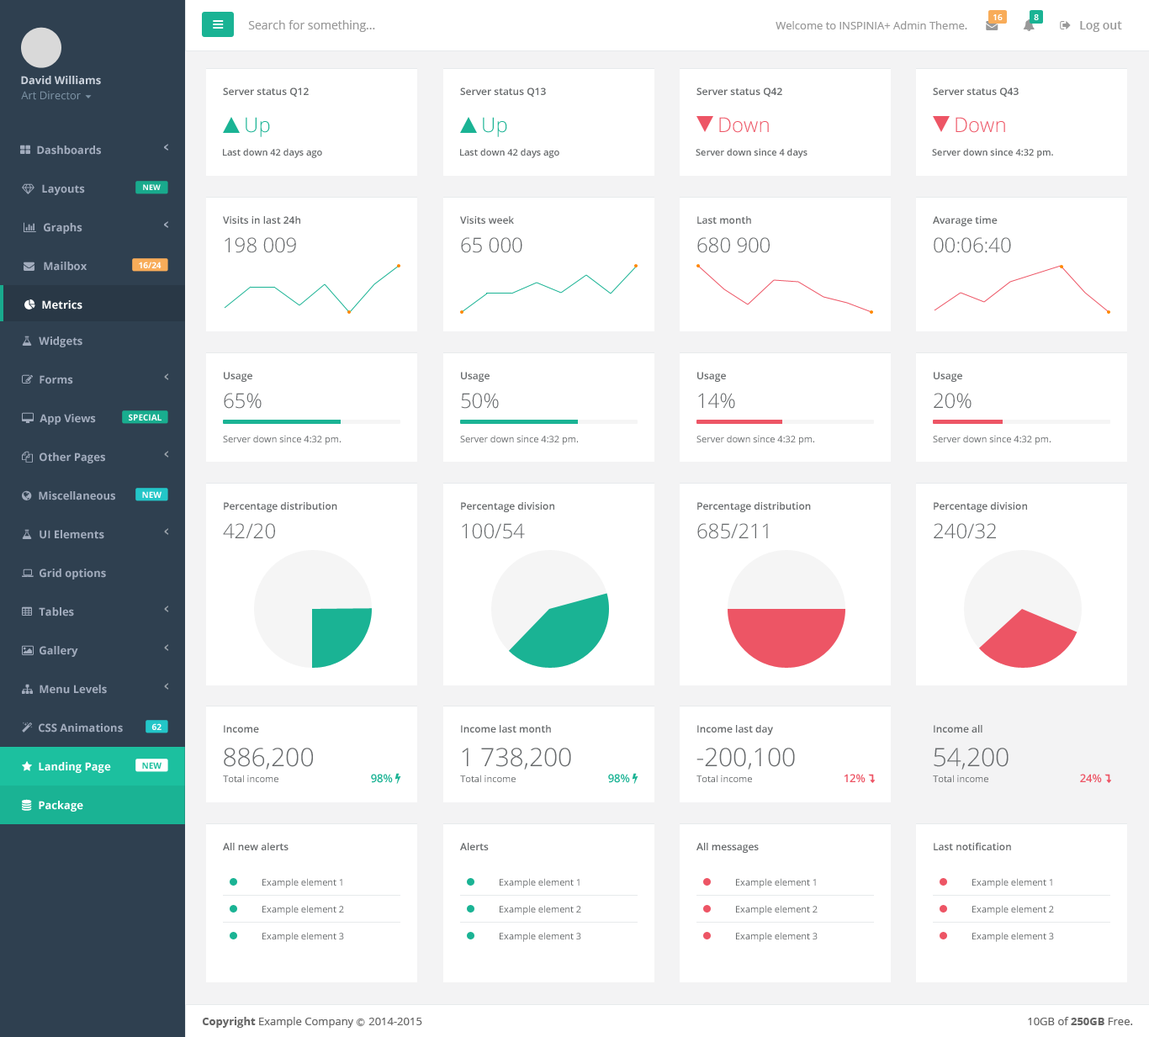
<style>
.page{position:relative;width:1149px;height:1037px;background:#ffffff}
.page>*{position:absolute;margin:0}
.t1{font:8.4px "OpenSans-Semibold";color:#ffffff}
.t2{font:11.8px "OpenSans";color:#999999}
.t3{font:10.9px "OpenSans";color:#999999}
.t4{font:11.8px "OpenSans-Semibold";color:#999999}
.t5{font:10.9px "OpenSans-Bold";color:#cad1db}
.t6{font:10.1px "OpenSans-Semibold";color:#676a6c}
.t7{font:10.9px "OpenSans";color:#7d93a5}
.t8{font:20.2px "OpenSans-Light";color:#1ab394}
.t9{font:20.2px "OpenSans-Light";color:#ed5565}
.t10{font:10.9px "OpenSans-Bold";color:#a2acbd}
.t11{font:9.3px "OpenSans-Semibold";color:#676a6c}
.t12{font:7.6px "OpenSans-Bold";color:#fefefe}
.t13{font:20.2px "OpenSans-Light";color:#676a6c}
.t14{font:8.4px "OpenSans-Bold";color:#fefefe}
.t15{font:10.9px "OpenSans-Bold";color:#ffffff}
.t16{font:9.3px "OpenSans";color:#676a6c}
.t17{font:25.2px "OpenSans-Light";color:#676a6c}
.t18{font:8.4px "OpenSans-Bold";color:#1cc09f}
.t19{font:10.9px "OpenSans-Semibold";color:#1ab394}
.t20{font:10.9px "OpenSans-Semibold";color:#ed5565}
.t21{font:10.9px "OpenSans";color:#666666}
.t22{font:10.9px "OpenSans-Bold";color:#666666}
.t23{font:8.4px "Meiryo";color:#666666}
</style>
<div class="page">
<p class="t1" style="left:994px;top:14px;width:9px;height:6px">16</p>
<p class="t1" style="left:1034px;top:14px;width:5px;height:6px">8</p>
<p class="t2" style="left:248px;top:20px;width:127px;height:12px">Search for something...</p>
<p class="t3" style="left:776px;top:21px;width:192px;height:8px">Welcome to INSPINIA+ Admin Theme.</p>
<p class="t4" style="left:1080px;top:21px;width:42px;height:11px">Log out</p>
<p class="t5" style="left:21px;top:76px;width:80px;height:9px">David Williams</p>
<p class="t6" style="left:223px;top:88px;width:86px;height:9px">Server status Q12</p>
<p class="t6" style="left:460px;top:88px;width:86px;height:9px">Server status Q13</p>
<p class="t6" style="left:697px;top:88px;width:86px;height:9px">Server status Q42</p>
<p class="t6" style="left:933px;top:88px;width:86px;height:9px">Server status Q43</p>
<p class="t7" style="left:21px;top:91px;width:60px;height:9px">Art Director</p>
<p class="t8" style="left:246px;top:117px;width:24px;height:20px">Up</p>
<p class="t8" style="left:483px;top:117px;width:24px;height:20px">Up</p>
<p class="t9" style="left:719px;top:117px;width:50px;height:16px">Down</p>
<p class="t9" style="left:956px;top:117px;width:49px;height:16px">Down</p>
<p class="t10" style="left:37px;top:146px;width:64px;height:9px">Dashboards</p>
<p class="t11" style="left:223px;top:148px;width:99px;height:10px">Last down 42 days ago</p>
<p class="t11" style="left:460px;top:148px;width:100px;height:10px">Last down 42 days ago</p>
<p class="t11" style="left:696px;top:148px;width:112px;height:10px">Server down since 4 days</p>
<p class="t11" style="left:932px;top:148px;width:121px;height:10px">Server down since 4:32 pm.</p>
<p class="t10" style="left:42px;top:184px;width:43px;height:11px">Layouts</p>
<p class="t12" style="left:143px;top:184px;width:18px;height:6px">NEW</p>
<p class="t6" style="left:223px;top:216px;width:77px;height:8px">Visits in last 24h</p>
<p class="t6" style="left:460px;top:216px;width:54px;height:8px">Visits week</p>
<p class="t6" style="left:698px;top:216px;width:53px;height:8px">Last month</p>
<p class="t6" style="left:933px;top:216px;width:65px;height:10px">Avarage time</p>
<p class="t10" style="left:44px;top:223px;width:38px;height:11px">Graphs</p>
<p class="t13" style="left:225px;top:237px;width:71px;height:16px">198 009</p>
<p class="t13" style="left:461px;top:237px;width:62px;height:16px">65 000</p>
<p class="t13" style="left:698px;top:237px;width:72px;height:16px">680 900</p>
<p class="t13" style="left:934px;top:237px;width:77px;height:16px">00:06:40</p>
<p class="t10" style="left:44px;top:262px;width:43px;height:9px">Mailbox</p>
<p class="t14" style="left:139px;top:262px;width:23px;height:6px">16/24</p>
<p class="t15" style="left:42px;top:300px;width:40px;height:10px">Metrics</p>
<p class="t10" style="left:39px;top:337px;width:43px;height:11px">Widgets</p>
<p class="t10" style="left:40px;top:375px;width:33px;height:10px">Forms</p>
<p class="t6" style="left:224px;top:372px;width:28px;height:10px">Usage</p>
<p class="t6" style="left:461px;top:372px;width:29px;height:10px">Usage</p>
<p class="t6" style="left:698px;top:372px;width:28px;height:10px">Usage</p>
<p class="t6" style="left:934px;top:372px;width:29px;height:10px">Usage</p>
<p class="t13" style="left:224px;top:393px;width:38px;height:16px">65%</p>
<p class="t13" style="left:461px;top:393px;width:38px;height:16px">50%</p>
<p class="t13" style="left:698px;top:393px;width:37px;height:16px">14%</p>
<p class="t13" style="left:934px;top:393px;width:38px;height:16px">20%</p>
<p class="t10" style="left:40px;top:414px;width:56px;height:11px">App Views</p>
<p class="t14" style="left:129px;top:414px;width:33px;height:7px">SPECIAL</p>
<p class="t16" style="left:223px;top:435px;width:118px;height:10px">Server down since 4:32 pm.</p>
<p class="t16" style="left:460px;top:435px;width:118px;height:10px">Server down since 4:32 pm.</p>
<p class="t16" style="left:697px;top:435px;width:117px;height:10px">Server down since 4:32 pm.</p>
<p class="t16" style="left:933px;top:435px;width:118px;height:10px">Server down since 4:32 pm.</p>
<p class="t10" style="left:40px;top:453px;width:65px;height:11px">Other Pages</p>
<p class="t10" style="left:39px;top:491px;width:76px;height:10px">Miscellaneous</p>
<p class="t14" style="left:142px;top:491px;width:20px;height:7px">NEW</p>
<p class="t6" style="left:224px;top:502px;width:113px;height:10px">Percentage distribution</p>
<p class="t6" style="left:461px;top:502px;width:93px;height:10px">Percentage division</p>
<p class="t6" style="left:698px;top:502px;width:113px;height:10px">Percentage distribution</p>
<p class="t6" style="left:934px;top:502px;width:93px;height:10px">Percentage division</p>
<p class="t10" style="left:40px;top:530px;width:64px;height:9px">UI Elements</p>
<p class="t13" style="left:223px;top:523px;width:52px;height:16px">42/20</p>
<p class="t13" style="left:462px;top:523px;width:63px;height:16px">100/54</p>
<p class="t13" style="left:698px;top:523px;width:70px;height:16px">685/211</p>
<p class="t13" style="left:934px;top:523px;width:62px;height:16px">240/32</p>
<p class="t10" style="left:40px;top:569px;width:66px;height:11px">Grid options</p>
<p class="t10" style="left:39px;top:608px;width:35px;height:9px">Tables</p>
<p class="t10" style="left:40px;top:646px;width:38px;height:11px">Gallery</p>
<p class="t10" style="left:40px;top:685px;width:67px;height:9px">Menu Levels</p>
<p class="t10" style="left:39px;top:724px;width:84px;height:9px">CSS Animations</p>
<p class="t14" style="left:151px;top:724px;width:11px;height:6px">62</p>
<p class="t6" style="left:224px;top:725px;width:35px;height:8px">Income</p>
<p class="t6" style="left:461px;top:725px;width:90px;height:8px">Income last month</p>
<p class="t6" style="left:698px;top:725px;width:75px;height:10px">Income last day</p>
<p class="t6" style="left:934px;top:725px;width:49px;height:8px">Income all</p>
<p class="t17" style="left:224px;top:748px;width:89px;height:22px">886,200</p>
<p class="t17" style="left:462px;top:748px;width:109px;height:22px">1 738,200</p>
<p class="t17" style="left:697px;top:748px;width:98px;height:22px">-200,100</p>
<p class="t17" style="left:934px;top:748px;width:75px;height:22px">54,200</p>
<p class="t15" style="left:39px;top:762px;width:72px;height:11px">Landing Page</p>
<p class="t18" style="left:142px;top:762px;width:20px;height:7px">NEW</p>
<p class="t16" style="left:223px;top:775px;width:56px;height:8px">Total income</p>
<p class="t19" style="left:371px;top:774px;width:22px;height:9px">98%</p>
<p class="t16" style="left:460px;top:775px;width:56px;height:8px">Total income</p>
<p class="t19" style="left:608px;top:774px;width:22px;height:9px">98%</p>
<p class="t16" style="left:697px;top:775px;width:55px;height:8px">Total income</p>
<p class="t20" style="left:844px;top:774px;width:22px;height:9px">12%</p>
<p class="t16" style="left:933px;top:775px;width:56px;height:8px">Total income</p>
<p class="t20" style="left:1080px;top:774px;width:22px;height:9px">24%</p>
<p class="t15" style="left:39px;top:801px;width:44px;height:11px">Package</p>
<p class="t6" style="left:223px;top:843px;width:66px;height:8px">All new alerts</p>
<p class="t6" style="left:460px;top:843px;width:29px;height:8px">Alerts</p>
<p class="t6" style="left:697px;top:843px;width:62px;height:10px">All messages</p>
<p class="t6" style="left:934px;top:843px;width:77px;height:8px">Last notification</p>
<p class="t16" style="left:263px;top:878px;width:79px;height:11px">Example element 1</p>
<p class="t16" style="left:500px;top:878px;width:80px;height:11px">Example element 1</p>
<p class="t16" style="left:736px;top:878px;width:80px;height:11px">Example element 1</p>
<p class="t16" style="left:973px;top:878px;width:80px;height:11px">Example element 1</p>
<p class="t16" style="left:263px;top:905px;width:81px;height:10px">Example element 2</p>
<p class="t16" style="left:500px;top:905px;width:81px;height:10px">Example element 2</p>
<p class="t16" style="left:736px;top:905px;width:82px;height:10px">Example element 2</p>
<p class="t16" style="left:973px;top:905px;width:81px;height:10px">Example element 2</p>
<p class="t16" style="left:263px;top:932px;width:81px;height:10px">Example element 3</p>
<p class="t16" style="left:500px;top:932px;width:81px;height:10px">Example element 3</p>
<p class="t16" style="left:736px;top:932px;width:82px;height:10px">Example element 3</p>
<p class="t16" style="left:973px;top:932px;width:81px;height:10px">Example element 3</p>
<p class="t21" style="left:202px;top:1017px;width:220px;height:11px"><span class="t22">Copyright</span> Example Company <span class="t23">Ⓒ </span>2014-2015</p>
<p class="t21" style="left:1028px;top:1017px;width:105px;height:9px">10GB of <span class="t22">250GB</span> Free.</p>
</div>
